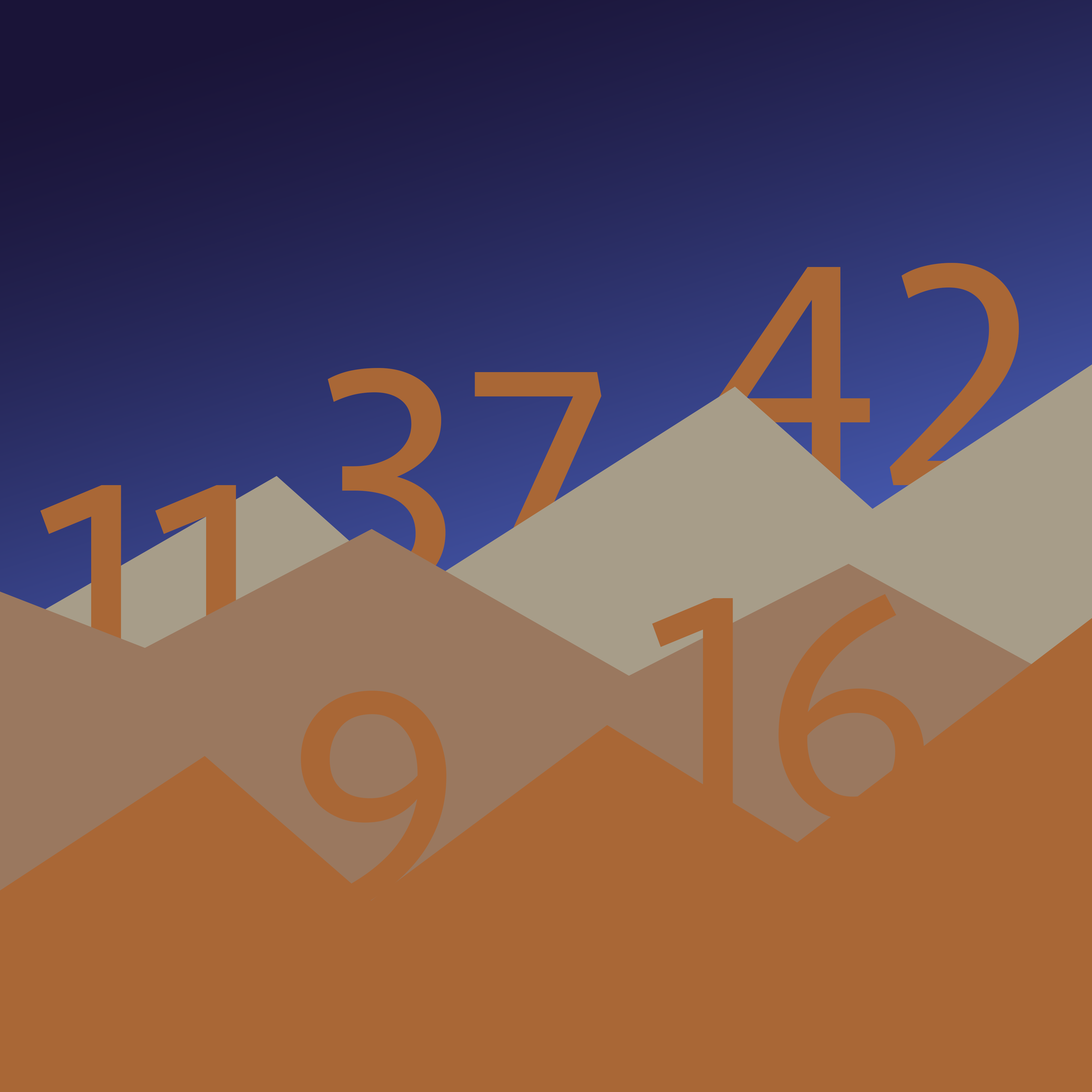
<style>
.page{position:relative;width:1092px;height:1092px;background:#a96736}
.page>*{position:absolute;margin:0}
.t1{font:327.6px "Seravek";color:#a96736}
</style>
<div class="page">
<p class="t1" style="left:717px;top:263px;width:305px;height:222px">42</p>
<p class="t1" style="left:320px;top:368px;width:281px;height:226px">37</p>
<p class="t1" style="left:40px;top:485px;width:196px;height:218px">11</p>
<p class="t1" style="left:652px;top:594px;width:272px;height:226px">16</p>
<p class="t1" style="left:301px;top:691px;width:145px;height:226px">9</p>
</div>
